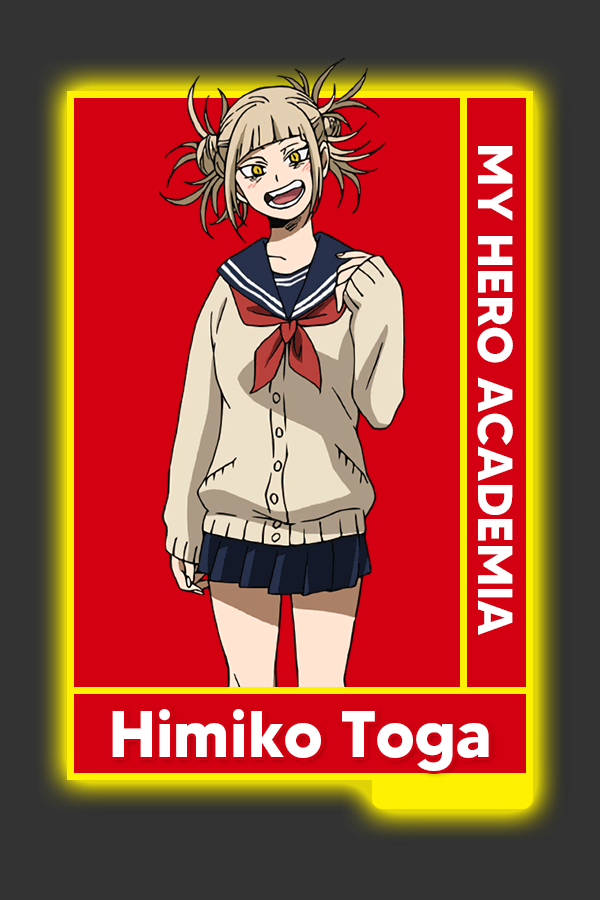
<style>
.page{position:relative;width:600px;height:900px;background:#d20010}
.page>*{position:absolute;margin:0}
.t1{font:48.8px "MADETOMMY-Bold";color:#ffffff}
.t2{font:65.2px "MADETOMMY-Bold";color:#ffffff}
</style>
<div class="page">
<p class="t1" style="left:477px;top:146px;width:36px;height:489px;rotate:90deg">MY HERO ACADEMIA</p>
<p class="t2" style="left:112px;top:709px;width:377px;height:62px">Himiko Toga</p>
</div>
